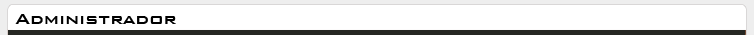
<style>
.page{position:relative;width:754px;height:35px;background:#ffffff}
.page>*{position:absolute;margin:0}
.t1{font:20px "BankGothicBT-Medium";color:#000000}
</style>
<div class="page">
<p class="t1" style="left:15px;top:14px;width:161px;height:10px">Administrador</p>
</div>
